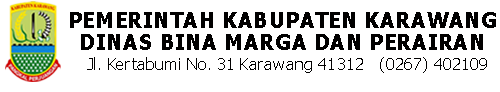
<style>
.page{position:relative;width:500px;height:92px;background:#ffffff}
.page>*{position:absolute;margin:0}
.t1{font:20.7px "Tahoma-Bold";color:#010000}
</style>
<div class="page">
<p class="t1" style="left:70px;top:12px;width:426px;height:16px">PEMERINTAH KABUPATEN KARAWANG</p>
<p class="t1" style="left:81px;top:34px;width:402px;height:16px">DINAS BINA MARGA DAN PERAIRAN</p>
</div>
